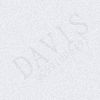
<style>
.page{position:relative;width:100px;height:100px}
.page>*{position:absolute;margin:0}
.t1{font:30px "MingLiU";letter-spacing:0.075em;color:#dddee3}
.t2{font:10px "MingLiU";letter-spacing:0.1em;color:#dfe0e5}
</style>
<div class="page">
<p class="t1" style="left:11px;top:12px;width:77px;height:68px;rotate:-38deg">DAVIS</p>
<p class="t2" style="left:34px;top:36px;width:55px;height:45px;rotate:-38deg">QQ591006492</p>
</div>
